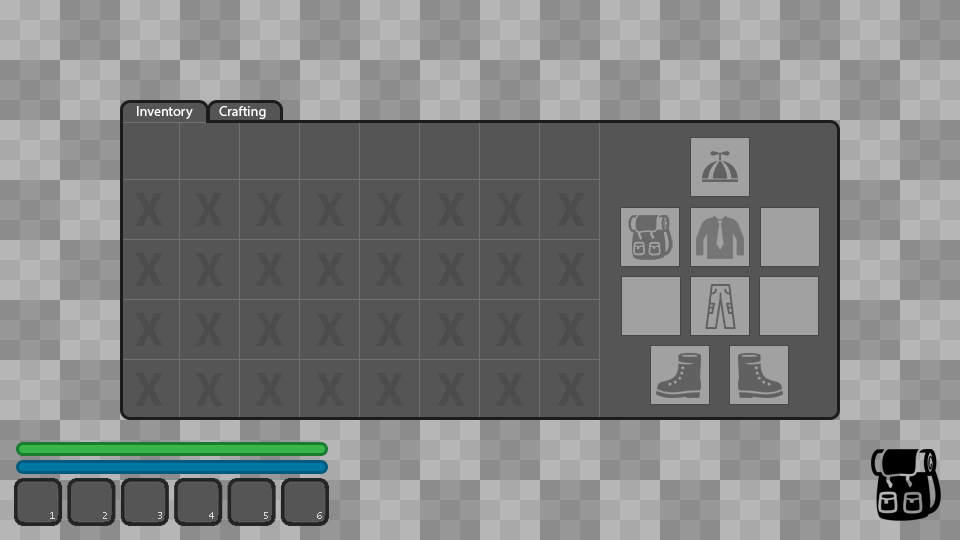
<style>
.page{position:relative;width:960px;height:540px;background:#555555}
.page>*{position:absolute;margin:0}
.t1{font:14px "MyriadPro-Regular";color:#ffffff}
.t2{font:48px "MyriadPro-Bold";color:#4c4c4c}
.t3{font:10.7px "LucidaConsole";color:#d7d7d7}
</style>
<div class="page">
<p class="t1" style="left:137px;top:106px;width:56px;height:13px">Inventory</p>
<p class="t1" style="left:219px;top:106px;width:47px;height:13px">Crafting</p>
<p class="t2" style="left:135px;top:193px;width:28px;height:33px">X</p>
<p class="t2" style="left:195px;top:193px;width:28px;height:33px">X</p>
<p class="t2" style="left:256px;top:193px;width:28px;height:33px">X</p>
<p class="t2" style="left:316px;top:193px;width:28px;height:33px">X</p>
<p class="t2" style="left:376px;top:193px;width:28px;height:33px">X</p>
<p class="t2" style="left:437px;top:193px;width:28px;height:33px">X</p>
<p class="t2" style="left:496px;top:193px;width:28px;height:33px">X</p>
<p class="t2" style="left:557px;top:193px;width:28px;height:33px">X</p>
<p class="t2" style="left:135px;top:253px;width:28px;height:33px">X</p>
<p class="t2" style="left:195px;top:253px;width:28px;height:33px">X</p>
<p class="t2" style="left:256px;top:253px;width:28px;height:33px">X</p>
<p class="t2" style="left:316px;top:253px;width:28px;height:33px">X</p>
<p class="t2" style="left:376px;top:253px;width:28px;height:33px">X</p>
<p class="t2" style="left:437px;top:253px;width:28px;height:33px">X</p>
<p class="t2" style="left:496px;top:253px;width:28px;height:33px">X</p>
<p class="t2" style="left:557px;top:253px;width:28px;height:33px">X</p>
<p class="t2" style="left:135px;top:313px;width:28px;height:33px">X</p>
<p class="t2" style="left:195px;top:313px;width:28px;height:33px">X</p>
<p class="t2" style="left:256px;top:313px;width:28px;height:33px">X</p>
<p class="t2" style="left:316px;top:313px;width:28px;height:33px">X</p>
<p class="t2" style="left:376px;top:313px;width:28px;height:33px">X</p>
<p class="t2" style="left:437px;top:313px;width:28px;height:33px">X</p>
<p class="t2" style="left:496px;top:313px;width:28px;height:33px">X</p>
<p class="t2" style="left:557px;top:313px;width:28px;height:33px">X</p>
<p class="t2" style="left:135px;top:373px;width:28px;height:33px">X</p>
<p class="t2" style="left:195px;top:373px;width:28px;height:33px">X</p>
<p class="t2" style="left:256px;top:373px;width:28px;height:33px">X</p>
<p class="t2" style="left:316px;top:373px;width:28px;height:33px">X</p>
<p class="t2" style="left:376px;top:373px;width:28px;height:33px">X</p>
<p class="t2" style="left:437px;top:373px;width:28px;height:33px">X</p>
<p class="t2" style="left:496px;top:373px;width:28px;height:33px">X</p>
<p class="t2" style="left:557px;top:373px;width:28px;height:33px">X</p>
<p class="t3" style="left:50px;top:512px;width:5px;height:7px">1</p>
<p class="t3" style="left:103px;top:512px;width:4px;height:7px">2</p>
<p class="t3" style="left:158px;top:512px;width:4px;height:7px">3</p>
<p class="t3" style="left:209px;top:512px;width:5px;height:7px">4</p>
<p class="t3" style="left:264px;top:512px;width:4px;height:7px">5</p>
<p class="t3" style="left:317px;top:512px;width:5px;height:7px">6</p>
</div>
